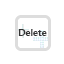
<style>
.page{position:relative;width:64px;height:64px;background:#ffffff}
.page>*{position:absolute;margin:0}
.t1{font:10px "AmiraParadiso";color:#333333}
</style>
<div class="page">
<p class="t1" style="left:18px;top:29px;width:29px;height:7px">Delete</p>
</div>
